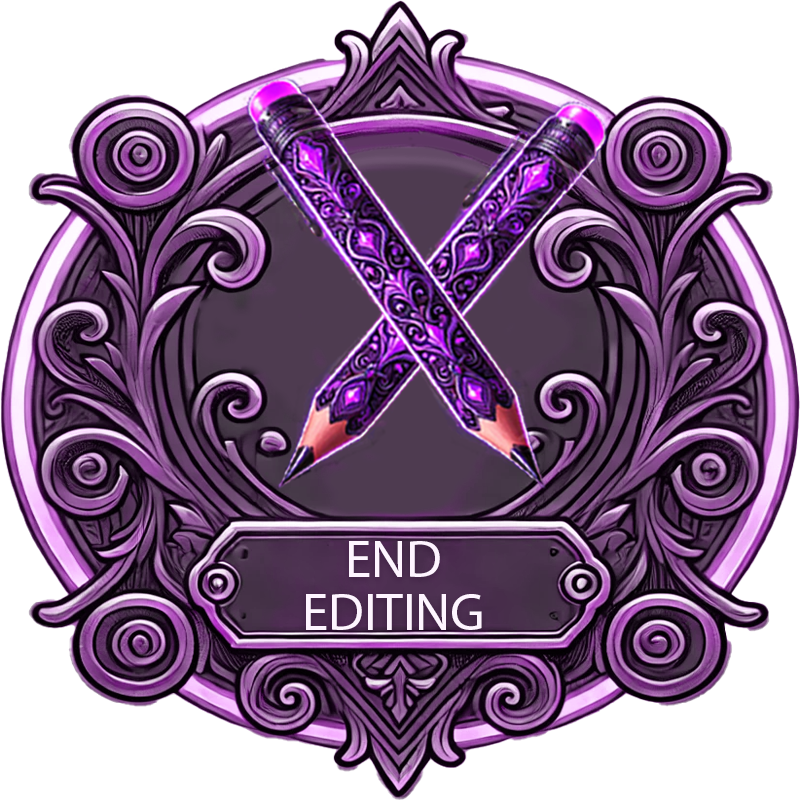
<style>
.page{position:relative;width:800px;height:800px;background:#ffffff}
.page>*{position:absolute;margin:0}
.t1{font:53.1px/53.1px "MyriadPro-Regular";color:#fef5ff}
</style>
<div class="page">
<p class="t1" style="left:306px;top:541px;width:176px;height:89px;text-align:center">END<br>EDITING</p>
</div>
